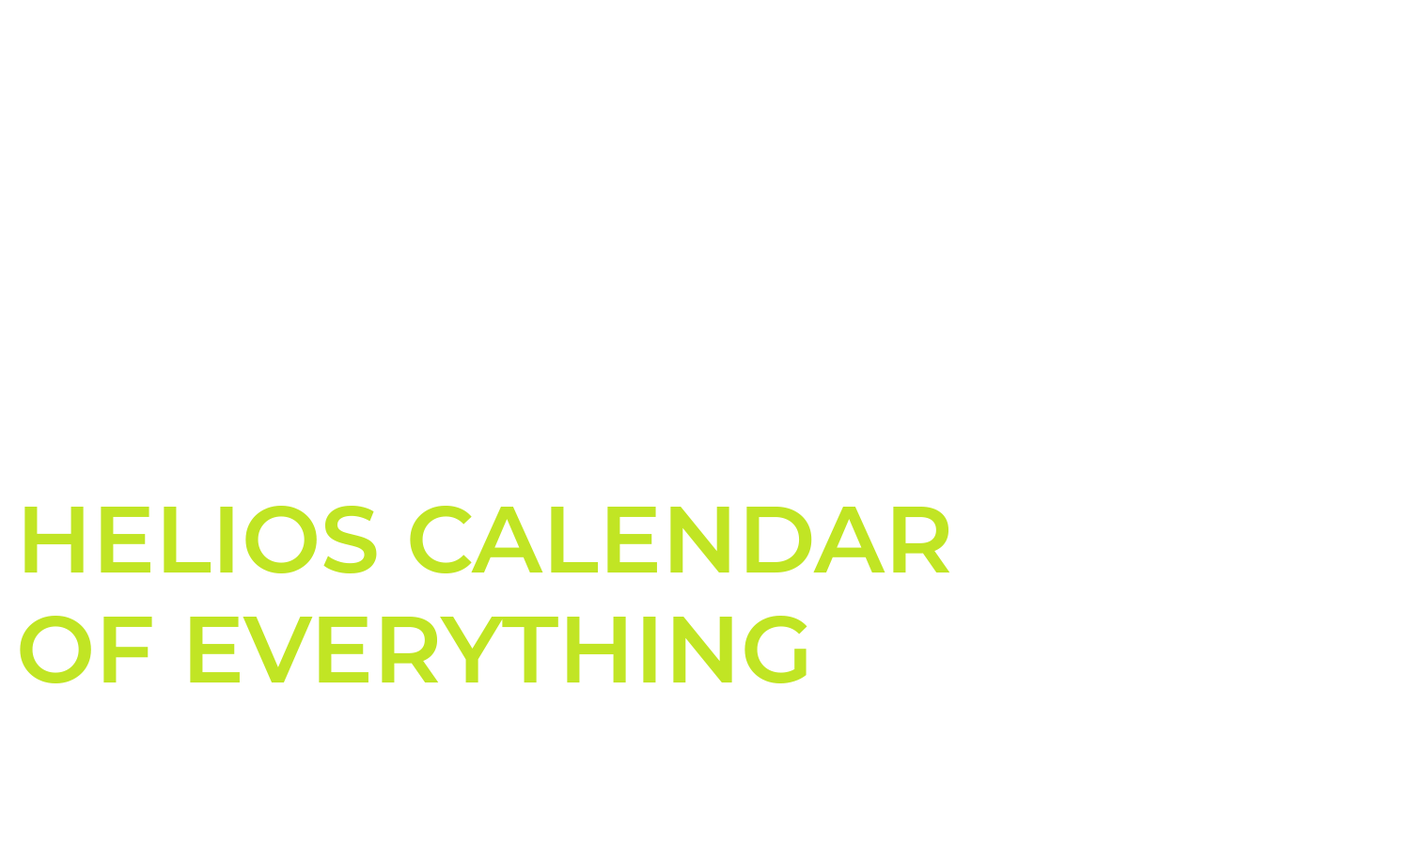
<style>
.page{position:relative;width:1410px;height:846px;background:#ffffff}
.page>*{position:absolute;margin:0}
.t1{font:94px/0.2px "Montserrat-SemiBold";color:#c1e524;text-transform:uppercase}
</style>
<div class="page">
<p class="t1" style="left:20px;top:506px;width:930px;height:177px">HELIOS CALENDAR<br>OF EVERYTHING</p>
</div>
